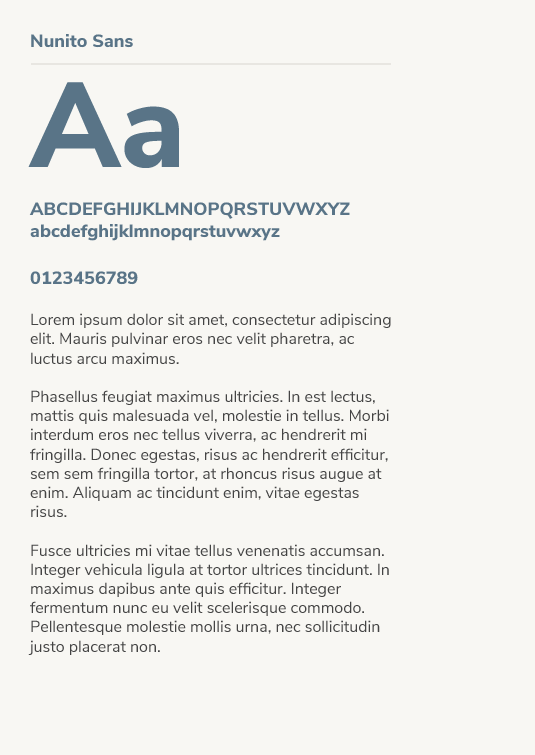
<style>
.page{position:relative;width:535px;height:755px;background:#f8f7f3}
.page>*{position:absolute;margin:0}
.t1{font:18px "NunitoSans-ExtraBold";color:#597487}
.t2{font:120px "NunitoSans-ExtraBold";color:#597487}
.t3{font:16px "NunitoSans-Regular";color:#444444}
</style>
<div class="page">
<p class="t1" style="left:31px;top:34px;width:102px;height:14px">Nunito Sans</p>
<p class="t2" style="left:28px;top:82px;width:151px;height:86px">Aa</p>
<p class="t1" style="left:29px;top:202px;width:321px;height:39px">ABCDEFGHIJKLMNOPQRSTUVWXYZ<br>abcdefghijklmnopqrstuvwxyz</p>
<p class="t1" style="left:30px;top:271px;width:108px;height:14px">0123456789</p>
<p class="t3" style="left:28px;top:313px;width:363px;height:342px">Lorem ipsum dolor sit amet, consectetur adipiscing elit. Mauris pulvinar eros nec velit pharetra, ac luctus arcu maximus. <br><br>Phasellus feugiat maximus ultricies. In est lectus, mattis quis malesuada vel, molestie in tellus. Morbi interdum eros nec tellus viverra, ac hendrerit mi fringilla. Donec egestas, risus ac hendrerit efficitur, sem sem fringilla tortor, at rhoncus risus augue at enim. Aliquam ac tincidunt enim, vitae egestas risus. <br><br>Fusce ultricies mi vitae tellus venenatis accumsan. Integer vehicula ligula at tortor ultrices tincidunt. In maximus dapibus ante quis efficitur. Integer fermentum nunc eu velit scelerisque commodo. Pellentesque molestie mollis urna, nec sollicitudin justo placerat non.</p>
</div>
